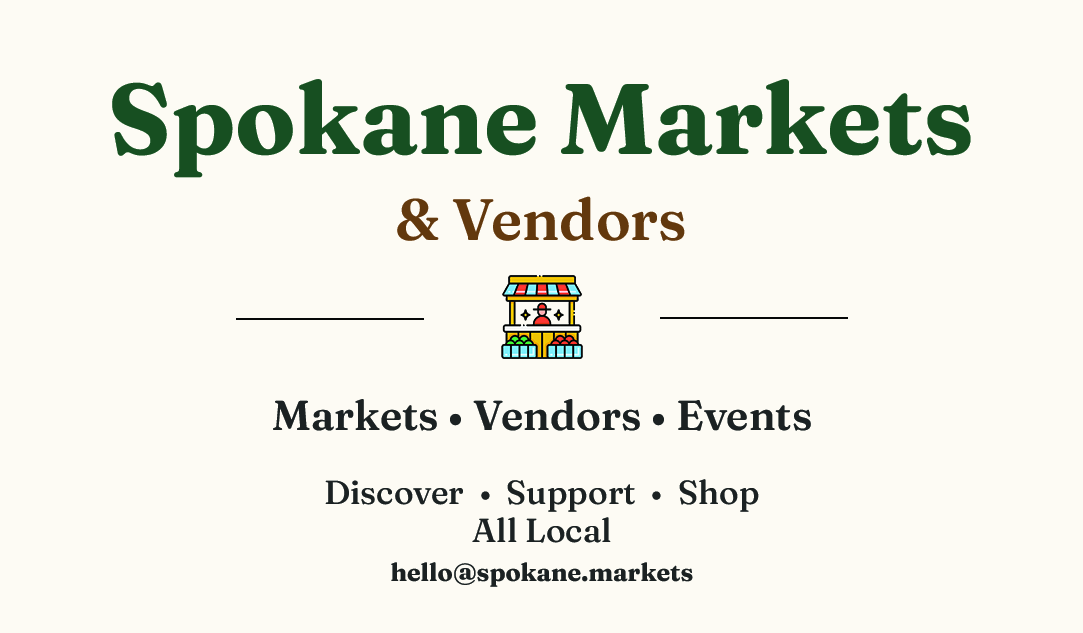
<style>
.page{position:relative;width:1083px;height:633px;background:#fdfbf4}
.page>*{position:absolute;margin:0}
.t1{font:100px "Fraunces-Bold";color:#174f22}
.t2{font:58.3px "Fraunces-SemiBold";color:#62370d}
.t3{font:41.7px "Fraunces-SemiBold";color:#1b2121}
.t4{font:33.3px "Fraunces-Medium";color:#1b2121}
.t5{font:25px "Fraunces-Bold";color:#1b2121}
</style>
<div class="page">
<p class="t1" style="left:112px;top:79px;width:859px;height:99px">Spokane Markets</p>
<p class="t2" style="left:397px;top:196px;width:288px;height:45px">&amp; Vendors</p>
<p class="t3" style="left:273px;top:399px;width:538px;height:32px">Markets • Vendors • Events</p>
<p class="t4" style="left:325px;top:479px;width:434px;height:33px">Discover  •  Support  •  Shop</p>
<p class="t4" style="left:472px;top:517px;width:139px;height:26px">All Local</p>
<p class="t5" style="left:391px;top:562px;width:302px;height:25px">hello@spokane.markets</p>
</div>
